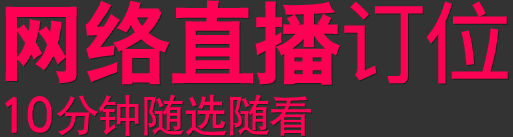
<style>
.page{position:relative;width:513px;height:137px;background:#333333}
.page>*{position:absolute;margin:0}
.t1{font:89.9px "ç»å¸ç²é»ç®-regular";letter-spacing:-0.05em;color:#ff0054}
.t2{font:89.9px "¾­µäÆ½ºÚ¼ò Regular";letter-spacing:-0.05em;color:#ff0054}
.t3{font:53.9px "ç»å¸é»ä½ç®-regular";letter-spacing:-0.025em;color:#ff0054}
.t4{font:43.9px "ç»å¸é»ä½ç®-regular";letter-spacing:-0.025em;color:#ff0054}
</style>
<div class="page">
<p class="t1" style="left:5px;top:0px;width:503px;height:85px">网络直播<span class="t2">订位</span></p>
<p class="t3" style="left:5px;top:96px;width:47px;height:37px">10</p>
<p class="t4" style="left:56px;top:94px;width:255px;height:42px">分钟随选随看</p>
</div>
